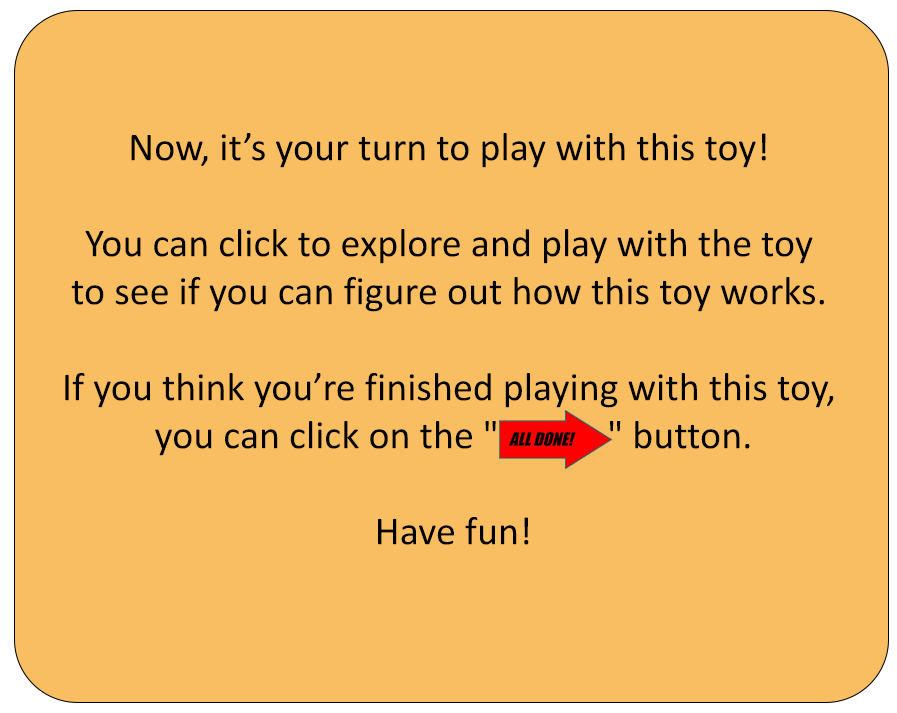
<style>
.page{position:relative;width:897px;height:713px;background:#f8be61}
.page>*{position:absolute;margin:0}
.t1{font:40px "Calibri";color:#000000}
</style>
<div class="page">
<p class="t1" style="left:65px;top:133px;width:769px;height:412px;text-align:center">Now, it’s your turn to play with this toy! <br><br>You can click to explore and play with the toy <br>to see if you can figure out how this toy works. <br><br>If you think you’re finished playing with this toy, <br>you can click on the "            " button.<br><br>Have fun!</p>
</div>
